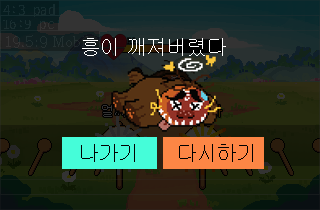
<style>
.page{position:relative;width:320px;height:210px}
.page>*{position:absolute;margin:0}
.t1{font:15px "D2Codingligature";color:#152c2f}
.t2{font:15px "D2Codingligature";color:#1a2d2f}
.t3{font:20px "Gulim";color:#ffffff}
.t4{font:12.9px "Gulim"}
.t5{font:20px "Gulim";color:#000000}
</style>
<div class="page">
<p class="t1" style="left:3px;top:4px;width:52px;height:13px">4:3 pad</p>
<p class="t2" style="left:3px;top:19px;width:51px;height:12px">16:9 pc</p>
<p class="t3" style="left:82px;top:38px;width:144px;height:18px">흥이 깨져버렸다</p>
<p class="t4" style="left:102px;top:105px;width:36px;height:12px">얼씨구</p>
<p class="t5" style="left:81px;top:144px;width:54px;height:18px">나가기</p>
<p class="t5" style="left:179px;top:144px;width:74px;height:18px">다시하기</p>
</div>
